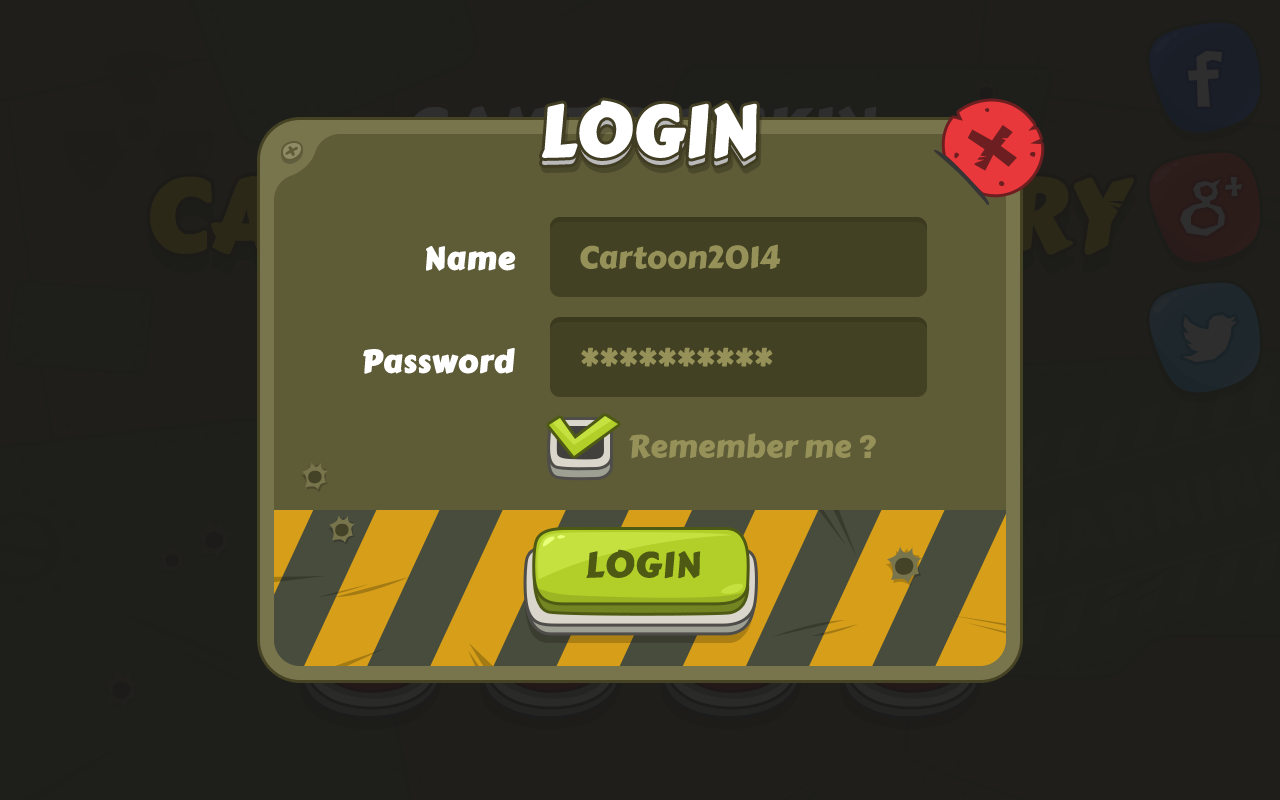
<style>
.page{position:relative;width:1280px;height:800px;background:#1f1e1b}
.page>*{position:absolute;margin:0}
.t1{font:70px "CarterOne";color:#ffffff;text-transform:uppercase;font-weight:bold}
.t2{font:31.1px "CarterOne";color:#ffffff;font-weight:bold}
.t3{font:31.1px "CarterOne";color:#959159}
.t4{font:31.1px "CarterOne";color:#ffffff;text-transform:uppercase;font-weight:bold}
.t5{font:35.2px "CarterOne";letter-spacing:-0.025em;color:#4e5a14;text-transform:uppercase;font-weight:bold;scale:1.05 1}
</style>
<div class="page">
<p class="t1" style="left:542px;top:100px;width:215px;height:59px">LOGIN</p>
<p class="t1" style="left:542px;top:107px;width:215px;height:59px">LOGIN</p>
<p class="t2" style="left:426px;top:246px;width:90px;height:25px">Name</p>
<p class="t3" style="left:580px;top:244px;width:201px;height:25px">Cartoon2014</p>
<p class="t2" style="left:363px;top:348px;width:152px;height:26px"><span class="t4">P</span>assword</p>
<p class="t3" style="left:581px;top:347px;width:192px;height:20px">**********</p>
<p class="t3" style="left:629px;top:433px;width:247px;height:26px">Remember me ?</p>
<p class="t5" style="left:586px;top:549px;width:115px;height:30px">LOGIN</p>
</div>
